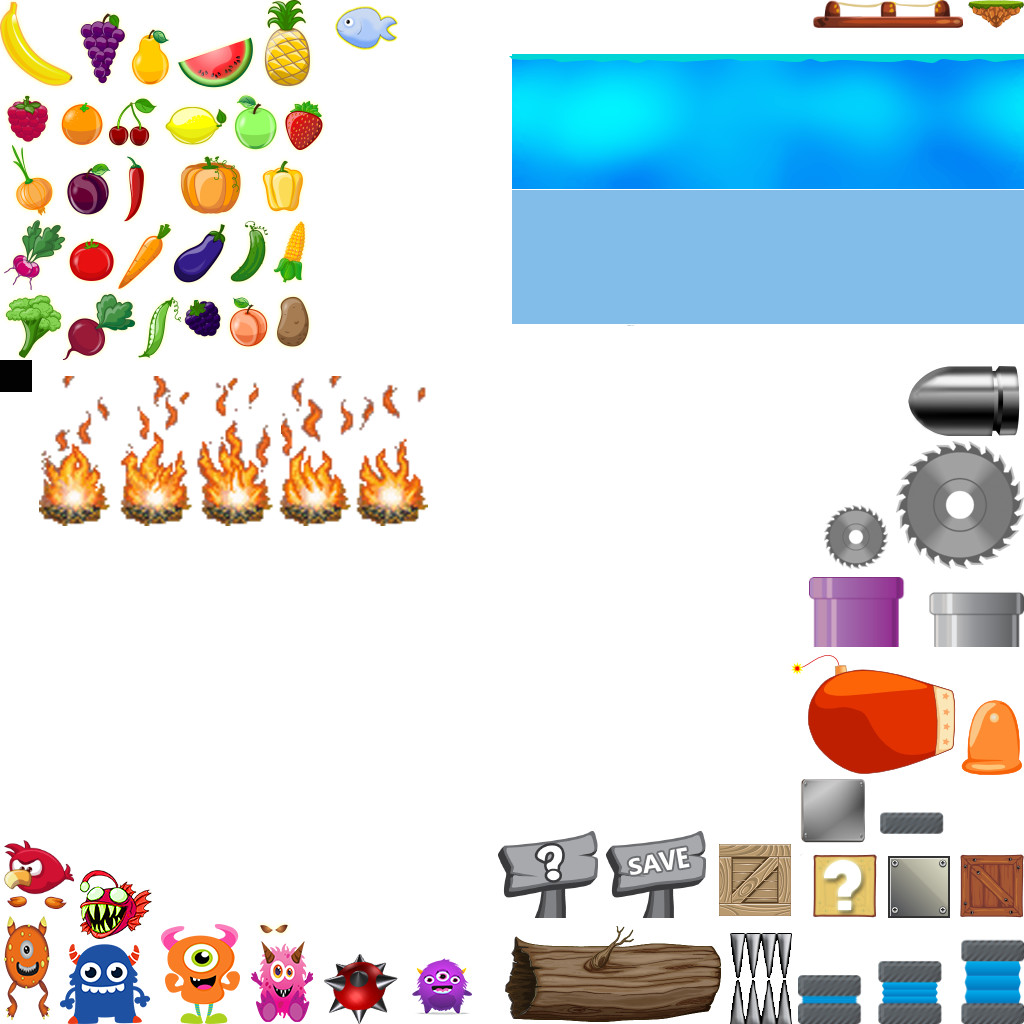
<style>
.page{position:relative;width:1024px;height:1024px;background:#ffffff}
.page>*{position:absolute;margin:0}
.t1{font:25px "MicrosoftTaiLe-Bold";color:#ffffff}
</style>
<div class="page">
<p class="t1" style="left:628px;top:847px;width:62px;height:28px;rotate:-9deg">SAVE</p>
</div>
